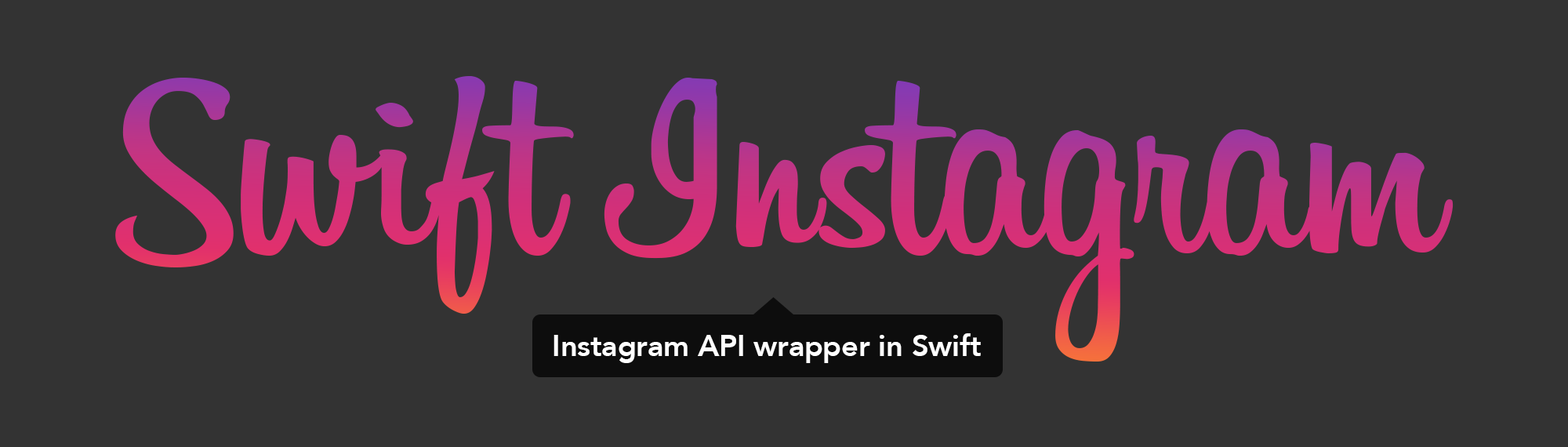
<style>
.page{position:relative;width:1568px;height:447px;background:#333333}
.page>*{position:absolute;margin:0}
.t1{font:271.1px "Billabong"}
.t2{font:29.4px "Avenir-Heavy";color:#ffffff}
</style>
<div class="page">
<p class="t1" style="left:115px;top:76px;width:1339px;height:285px">Swift Instagram</p>
<p class="t2" style="left:554px;top:333px;width:427px;height:30px">Instagram API wrapper in Swift</p>
</div>
